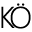
<style>
.page{position:relative;width:32px;height:32px;background:#ffffff}
.page>*{position:absolute;margin:0}
.t1{font:30px "SegoeUI-Light";color:#000000}
</style>
<div class="page">
<p class="t1" style="left:1px;top:6px;width:14px;height:22px">K</p>
<p class="t1" style="left:10px;top:3px;width:21px;height:26px">Ö</p>
</div>
